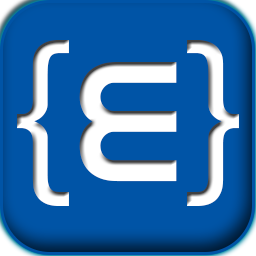
<style>
.page{position:relative;width:256px;height:256px;background:#0054a6}
.page>*{position:absolute;margin:0}
.t1{font:172px "NasalizationRg-Regular";color:#ffffff}
</style>
<div class="page">
<p class="t1" style="left:17px;top:40px;width:222px;height:166px">{E}</p>
</div>
